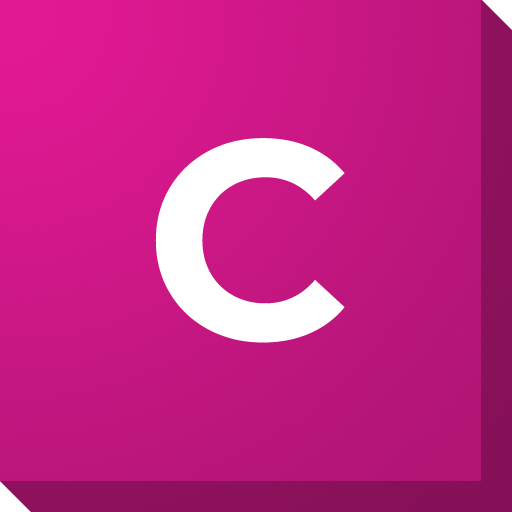
<style>
.page{position:relative;width:512px;height:512px}
.page>*{position:absolute;margin:0}
.t1{font:282px "Montserrat-Bold";color:#ffffff}
</style>
<div class="page">
<p class="t1" style="left:155px;top:138px;width:190px;height:205px">C</p>
</div>
